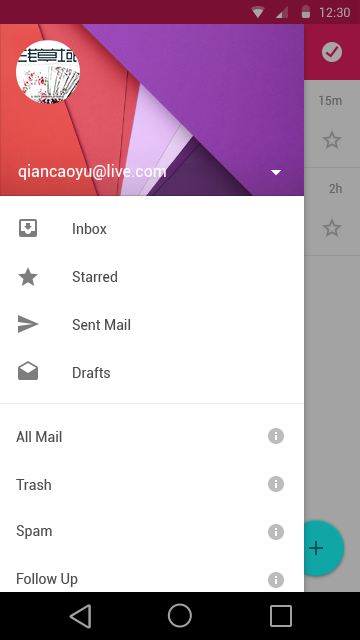
<style>
.page{position:relative;width:360px;height:640px;background:#ffffff}
.page>*{position:absolute;margin:0}
.t1{font:12.7px "Roboto-Regular";color:#a6a6a6}
.t2{font:12px "Roboto-Regular";color:#646464}
.t3{font:16px "Roboto-Regular";color:#ffffff}
.t4{font:14px "Roboto-Regular";color:#4d4d4d}
</style>
<div class="page">
<p class="t1" style="left:320px;top:7px;width:30px;height:10px">12:30</p>
<p class="t2" style="left:319px;top:95px;width:23px;height:10px">15m</p>
<p class="t3" style="left:18px;top:164px;width:148px;height:16px">qiancaoyu@live.com</p>
<p class="t2" style="left:329px;top:183px;width:13px;height:10px">2h</p>
<p class="t4" style="left:73px;top:223px;width:34px;height:11px">Inbox</p>
<p class="t4" style="left:72px;top:271px;width:45px;height:11px">Starred</p>
<p class="t4" style="left:72px;top:319px;width:59px;height:11px">Sent Mail</p>
<p class="t4" style="left:73px;top:367px;width:37px;height:11px">Drafts</p>
<p class="t4" style="left:16px;top:431px;width:46px;height:11px">All Mail</p>
<p class="t4" style="left:16px;top:479px;width:35px;height:11px">Trash</p>
<p class="t4" style="left:16px;top:525px;width:36px;height:14px">Spam</p>
<p class="t4" style="left:17px;top:573px;width:61px;height:14px">Follow Up</p>
</div>
